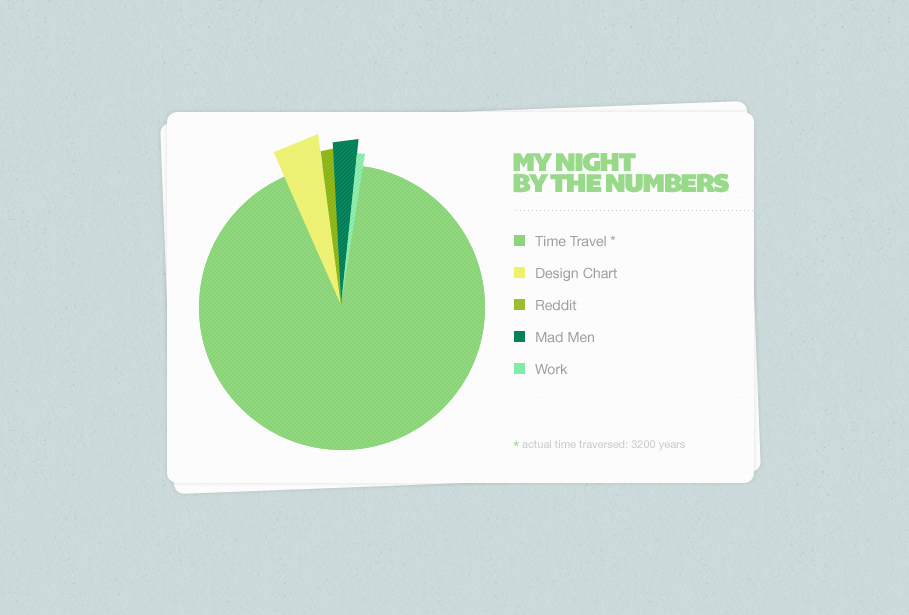
<style>
.page{position:relative;width:909px;height:615px}
.page>*{position:absolute;margin:0}
.t1{font:26.4px "Bemio";letter-spacing:-0.075em;color:#99d98a}
.t2{font:14px "HelveticaNeue";color:#9f9e9e}
.t3{font:16px "HelveticaNeue";letter-spacing:-0.075em;color:#9f9e9e}
.t4{font:18.6px "HelveticaNeue";letter-spacing:-0.075em;color:#99d98a}
.t5{font:11px "HelveticaNeue";color:#cacaca}
</style>
<div class="page">
<p class="t1" style="left:513px;top:152px;width:123px;height:20px">MY NIGHT</p>
<p class="t1" style="left:513px;top:173px;width:216px;height:20px">BY THE NUMBERS</p>
<p class="t2" style="left:535px;top:236px;width:71px;height:11px">Time Travel</p>
<p class="t3" style="left:610px;top:235px;width:6px;height:5px">*</p>
<p class="t2" style="left:536px;top:267px;width:81px;height:14px">Design Chart</p>
<p class="t2" style="left:536px;top:300px;width:41px;height:11px">Reddit</p>
<p class="t2" style="left:536px;top:332px;width:58px;height:11px">Mad Men</p>
<p class="t2" style="left:535px;top:364px;width:33px;height:11px">Work</p>
<p class="t4" style="left:513px;top:440px;width:6px;height:6px">*</p>
<p class="t5" style="left:522px;top:440px;width:163px;height:11px">actual time traversed: 3200 years</p>
</div>
